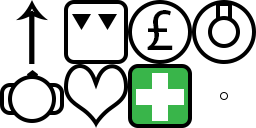
<style>
.page{position:relative;width:256px;height:128px;background:#ffffff}
.page>*{position:absolute;margin:0}
.t1{font:60px "MyriadPro-Regular";color:#000000}
</style>
<div class="page">
<p class="t1" style="left:147px;top:10px;width:26px;height:40px">£</p>
</div>
